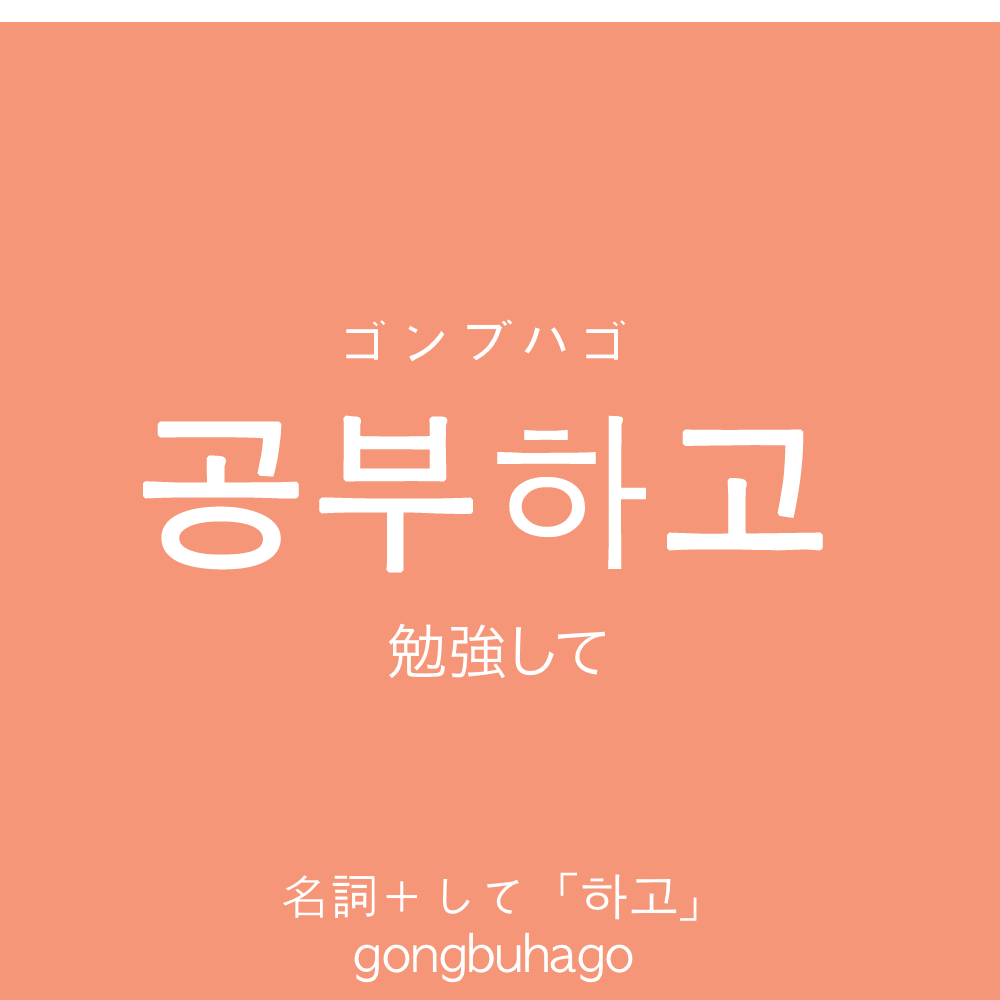
<style>
.page{position:relative;width:1000px;height:1000px;background:#f69679}
.page>*{position:absolute;margin:0}
.t1{font:60px "AppleGothic";color:#ffffff}
.t2{font:170px "AppleGothic";color:#ffffff;font-weight:bold}
.t3{font:60px "HiraKakuProN-W3";color:#ffffff}
.t4{font:50px "AppleGothic";color:#ffffff}
</style>
<div class="page">
<p class="t1" style="left:346px;top:319px;width:279px;height:43px">ゴンブハゴ</p>
<p class="t2" style="left:143px;top:415px;width:680px;height:158px">공부하고</p>
<p class="t3" style="left:388px;top:623px;width:217px;height:56px">勉強して</p>
<p class="t4" style="left:283px;top:872px;width:414px;height:49px">名詞＋して「하고」</p>
<p class="t4" style="left:354px;top:932px;width:279px;height:51px">gongbuhago</p>
</div>
